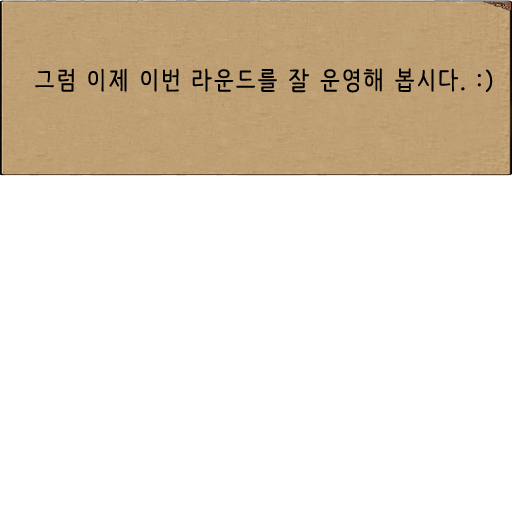
<style>
.page{position:relative;width:512px;height:512px;background:#ffffff}
.page>*{position:absolute;margin:0}
.t1{font:25px "NanumBarunpen";letter-spacing:0.075em;color:#000000;font-weight:bold}
</style>
<div class="page">
<p class="t1" style="left:35px;top:68px;width:458px;height:25px">그럼 이제 이번 라운드를 잘 운영해 봅시다. :)</p>
</div>
